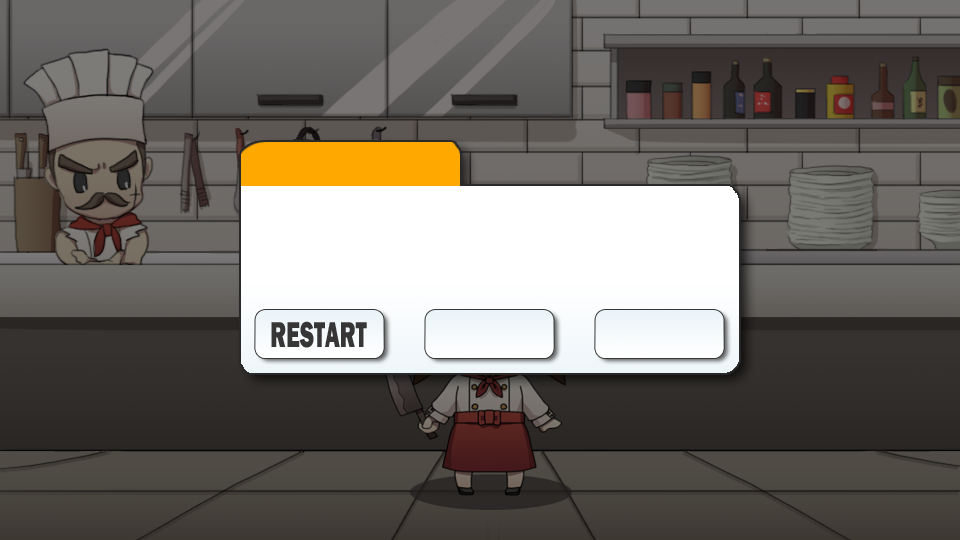
<style>
.page{position:relative;width:960px;height:540px}
.page>*{position:absolute;margin:0}
.t1{font:37.2px "FranklinGothic-Heavy";color:#363636;scale:0.62 1}
</style>
<div class="page">
<p class="t1" style="left:271px;top:321px;width:96px;height:27px">RESTART</p>
</div>
